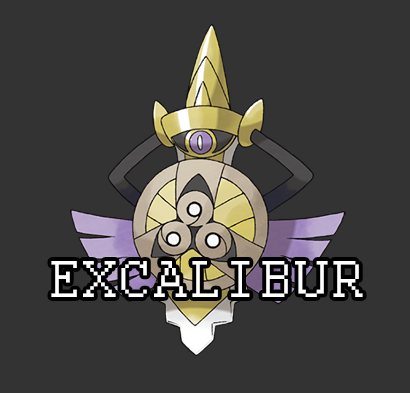
<style>
.page{position:relative;width:410px;height:393px;background:#333333}
.page>*{position:absolute;margin:0}
.t1{font:57.8px "Courier";letter-spacing:0.048em;color:#ffffff}
</style>
<div class="page">
<p class="t1" style="left:51px;top:261px;width:312px;height:36px">EXCALIBUR</p>
</div>
